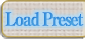
<style>
.page{position:relative;width:85px;height:39px}
.page>*{position:absolute;margin:0}
.t1{font:18px "RyuminPro-ExBold";letter-spacing:-0.12em;color:#3d94dc;font-weight:bold;scale:0.9 1}
</style>
<div class="page">
<p class="t1" style="left:5px;top:12px;width:79px;height:14px">Load Preset</p>
</div>
